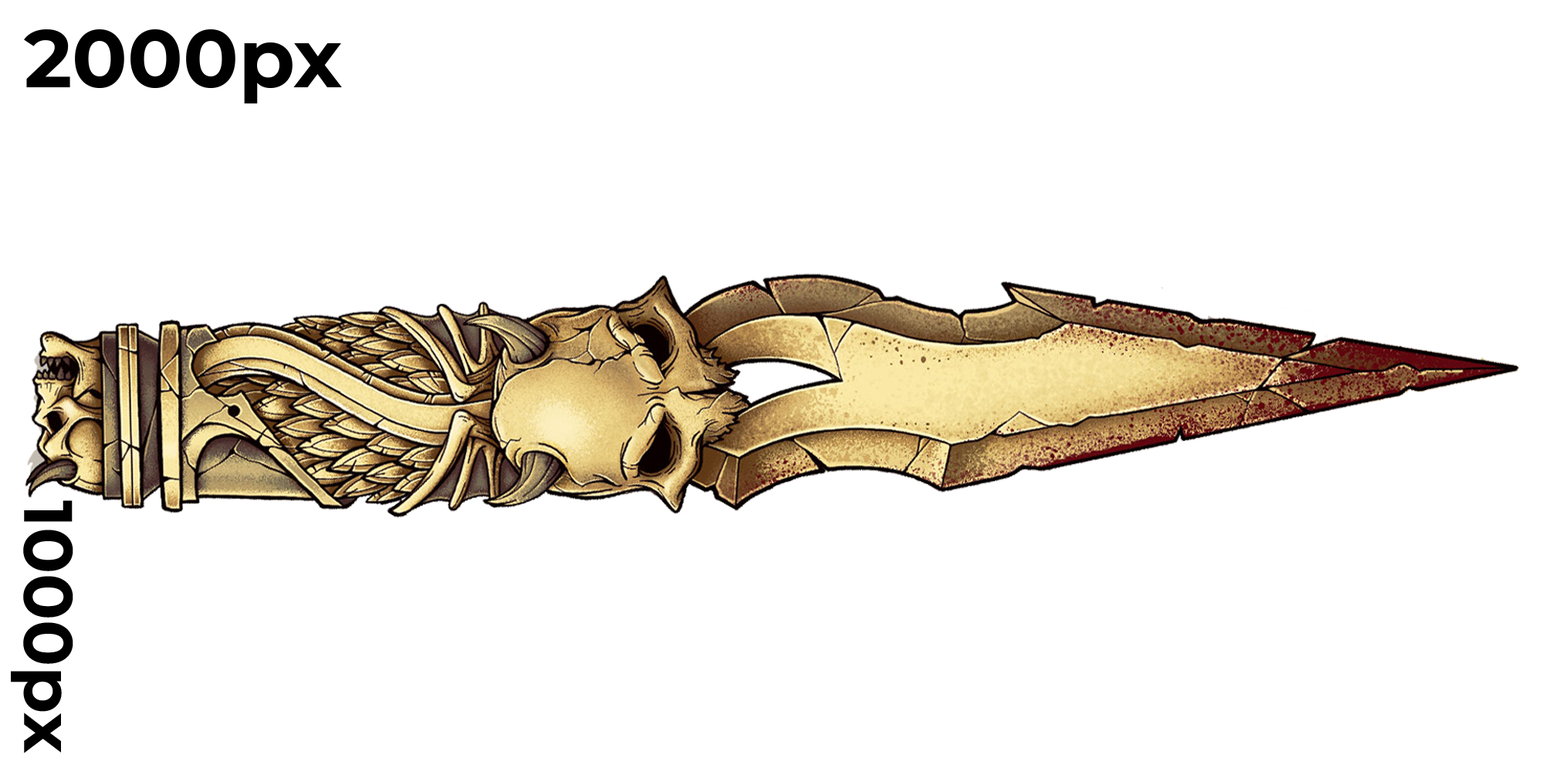
<style>
.page{position:relative;width:1544px;height:772px;background:#ffffff}
.page>*{position:absolute;margin:0}
.t1{font:81.8px "Montserrat-Bold";color:#000000}
.t2{font:68.5px "Montserrat-Bold";color:#000000}
</style>
<div class="page">
<p class="t1" style="left:24px;top:29px;width:318px;height:74px">2000px</p>
<p class="t2" style="left:11px;top:500px;width:62px;height:254px;rotate:90deg">1000px</p>
</div>
